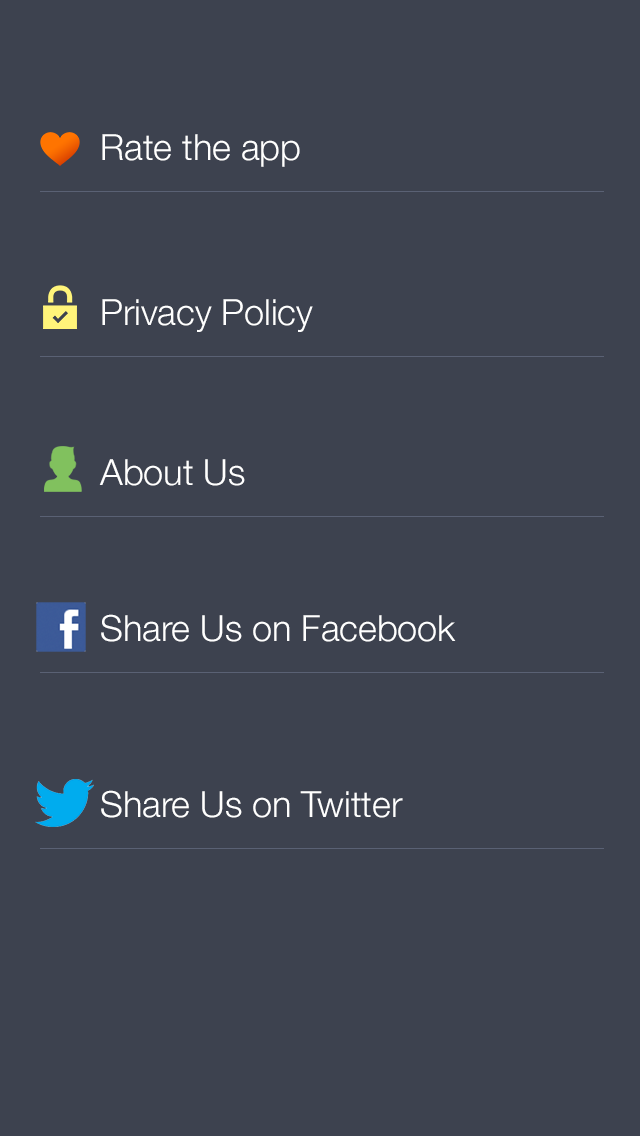
<style>
.page{position:relative;width:640px;height:1136px;background:#3d424f}
.page>*{position:absolute;margin:0}
.t1{font:36px "HelveticaNeue-Light";color:#ffffff}
</style>
<div class="page">
<p class="t1" style="left:102px;top:134px;width:198px;height:33px">Rate the app</p>
<p class="t1" style="left:102px;top:299px;width:211px;height:33px">Privacy Policy</p>
<p class="t1" style="left:99px;top:459px;width:146px;height:27px">About Us</p>
<p class="t1" style="left:101px;top:614px;width:355px;height:28px">Share Us on Facebook</p>
<p class="t1" style="left:101px;top:790px;width:302px;height:28px">Share Us on Twitter</p>
</div>
